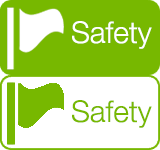
<style>
.page{position:relative;width:160px;height:150px;background:#77b800}
.page>*{position:absolute;margin:0}
.t1{font:30px "HelveticaNeue-Light";color:#ffffff}
.t2{font:30px "HelveticaNeue-Light";color:#77b800}
</style>
<div class="page">
<p class="t1" style="left:72px;top:21px;width:80px;height:28px">Safety</p>
<p class="t2" style="left:72px;top:100px;width:80px;height:28px">Safety</p>
</div>
